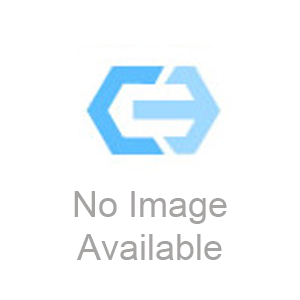
<style>
.page{position:relative;width:300px;height:300px;background:#ffffff}
.page>*{position:absolute;margin:0}
.t1{font:36px "ArialMT";color:#a6a4a3}
</style>
<div class="page">
<p class="t1" style="left:74px;top:191px;width:153px;height:69px;text-align:center">No Image <br>Available</p>
</div>
